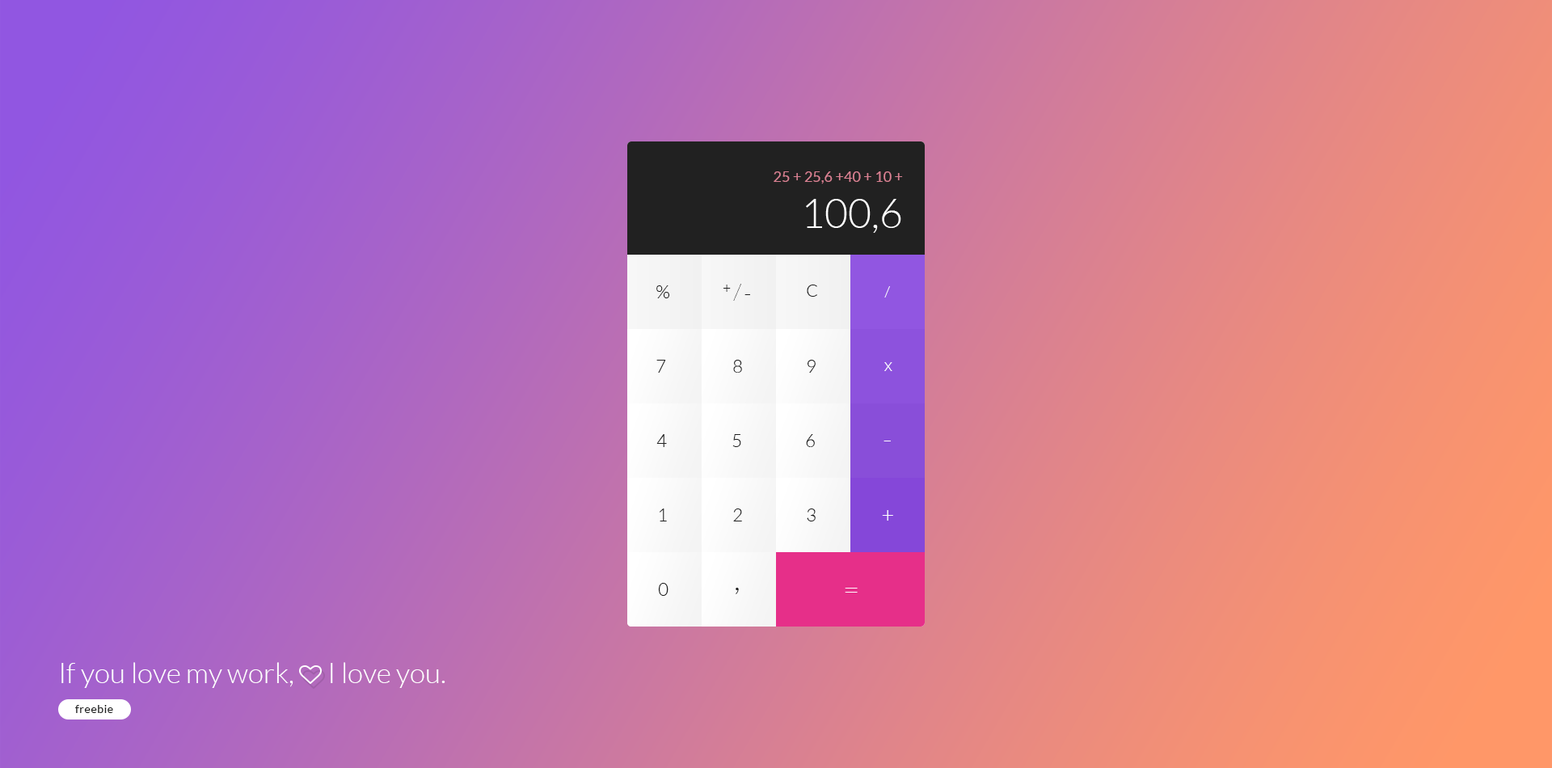
<style>
.page{position:relative;width:1552px;height:768px}
.page>*{position:absolute;margin:0}
.t1{font:14.6px "Lato-Regular";color:#d98192}
.t2{font:40.4px "Lato-Light";color:#ffffff}
.t3{font:18.6px "Lato-Light";color:#212121}
.t4{font:13.7px "Lato-Light";color:#212121}
.t5{font:22.6px "Lato-Hairline"}
.t6{font:17px "Lato-Light";color:#212121}
.t7{font:14.6px "Lato-Light";color:#ffffff}
.t8{font:21px "Lato-Light";color:#212121}
.t9{font:17.8px "Lato-Light";color:#212121}
.t10{font:17.8px "Lato-Light";color:#ffffff}
.t11{font:30.6px "Lato-Light";color:#ffffff;scale:0.93 1}
.t12{font:21.8px "Lato-Light";color:#ffffff}
.t13{font:32.3px "Lato-Light";color:#212121}
.t14{font:28.3px "Lato-Light";color:#ffffff}
.t15{font:11.3px "Lato-Regular";letter-spacing:0.04em;color:#212121}
</style>
<div class="page">
<p class="t1" style="left:774px;top:171px;width:129px;height:13px">25 + 25,6 +40 + 10 +</p>
<p class="t2" style="left:806px;top:199px;width:96px;height:34px">100,6</p>
<p class="t3" style="left:657px;top:285px;width:12px;height:13px">%</p>
<p class="t4" style="left:724px;top:285px;width:7px;height:7px">+</p>
<p class="t5" style="left:733px;top:284px;width:8px;height:17px">/</p>
<p class="t6" style="left:807px;top:285px;width:10px;height:12px">C</p>
<p class="t7" style="left:885px;top:286px;width:5px;height:12px">/</p>
<p class="t8" style="left:745px;top:294px;width:5px;height:1px">-</p>
<p class="t9" style="left:657px;top:360px;width:9px;height:13px">7</p>
<p class="t9" style="left:733px;top:360px;width:9px;height:13px">8</p>
<p class="t9" style="left:808px;top:360px;width:8px;height:13px">9</p>
<p class="t10" style="left:885px;top:362px;width:8px;height:9px">x</p>
<p class="t9" style="left:657px;top:434px;width:10px;height:13px">4</p>
<p class="t9" style="left:733px;top:434px;width:8px;height:13px">5</p>
<p class="t9" style="left:806px;top:434px;width:9px;height:13px">6</p>
<p class="t11" style="left:884px;top:441px;width:7px;height:0px">-</p>
<p class="t9" style="left:659px;top:509px;width:8px;height:13px">1</p>
<p class="t9" style="left:733px;top:509px;width:9px;height:13px">2</p>
<p class="t9" style="left:807px;top:509px;width:9px;height:13px">3</p>
<p class="t12" style="left:882px;top:510px;width:11px;height:11px">+</p>
<p class="t9" style="left:658px;top:583px;width:11px;height:13px">0</p>
<p class="t13" style="left:736px;top:588px;width:3px;height:6px">,</p>
<p class="t14" style="left:845px;top:588px;width:13px;height:5px">=</p>
<p class="t14" style="left:61px;top:662px;width:385px;height:26px">If you love my work,      I love you.</p>
<p class="t15" style="left:75px;top:705px;width:38px;height:8px">freebie</p>
</div>
